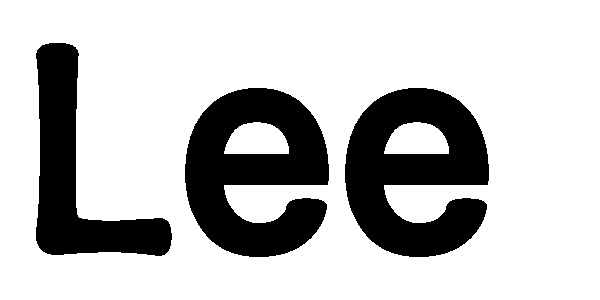
<style>
.page{position:relative;width:600px;height:300px;background:#ffffff}
.page>*{position:absolute;margin:0}
.t1{font:300px "YetR-HM";color:#000000}
</style>
<div class="page">
<p class="t1" style="left:36px;top:43px;width:453px;height:214px">Lee</p>
</div>
